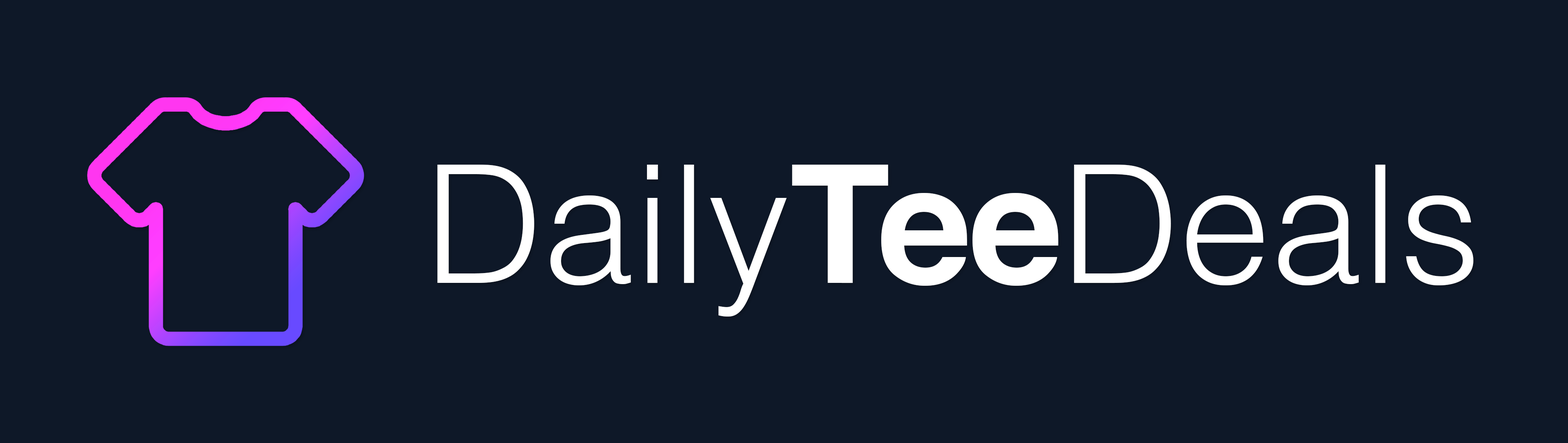
<style>
.page{position:relative;width:1568px;height:443px;background:#0e1828}
.page>*{position:absolute;margin:0}
.t1{font:164.4px "Helvetica-Light";color:#ffffff}
.t2{font:164.4px "Helvetica-Bold";color:#ffffff}
</style>
<div class="page">
<p class="t1" style="left:437px;top:165px;width:1036px;height:152px">Daily<span class="t2">Tee</span>Deals</p>
</div>
